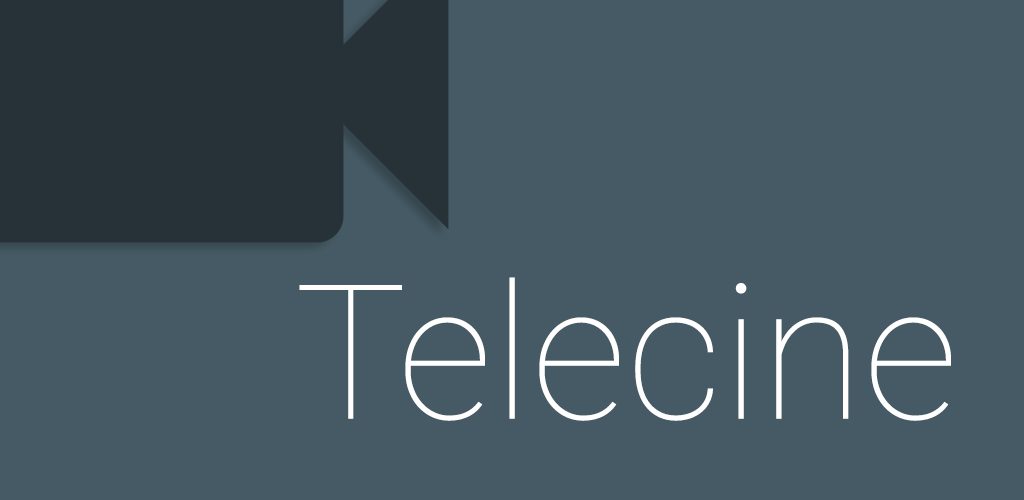
<style>
.page{position:relative;width:1024px;height:500px;background:#455a64}
.page>*{position:absolute;margin:0}
.t1{font:188px "Roboto-Thin";color:#ffffff}
</style>
<div class="page">
<p class="t1" style="left:299px;top:277px;width:652px;height:144px">Telecine</p>
</div>
